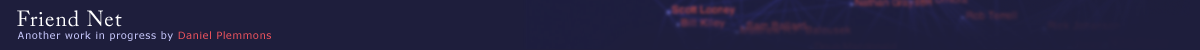
<style>
.page{position:relative;width:1200px;height:50px;background:#1e1e3c}
.page>*{position:absolute;margin:0}
.t1{font:21.7px "ACaslonPro-Regular";letter-spacing:0.043em;color:#ffffff}
.t2{font:10.1px "Verdana";letter-spacing:0.043em;color:#c4c4f8}
.t3{font:10.1px "Verdana";letter-spacing:0.043em;color:#e9525c}
</style>
<div class="page">
<p class="t1" style="left:17px;top:10px;width:105px;height:17px">Friend Net</p>
<p class="t2" style="left:17px;top:31px;width:254px;height:10px">Another work in progress by <span class="t3">Daniel Plemmons</span></p>
</div>
